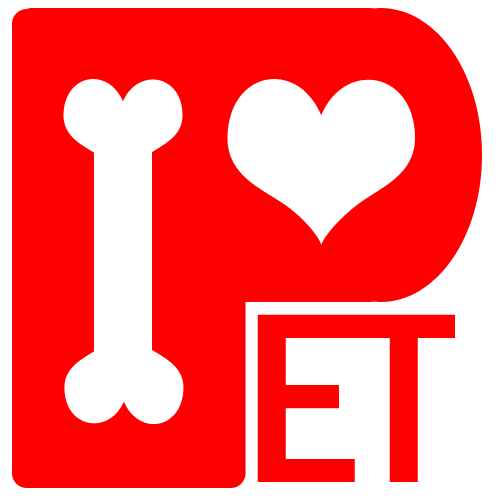
<style>
.page{position:relative;width:500px;height:500px;background:#ff0000}
.page>*{position:absolute;margin:0}
.t1{font:250px "FranklinGothic-MediumCond";color:#ff0000}
</style>
<div class="page">
<p class="t1" style="left:257px;top:314px;width:198px;height:168px">ET</p>
</div>
